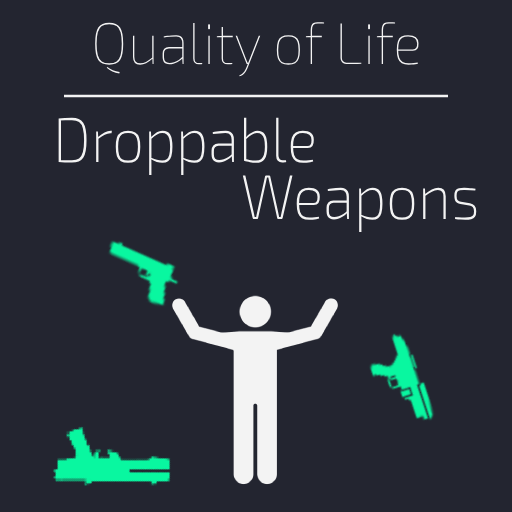
<style>
.page{position:relative;width:512px;height:512px;background:#232530}
.page>*{position:absolute;margin:0}
.t1{font:58.6px "Exo2-Thin";color:#f3f3f3;scale:0.94 1}
.t2{font:63.1px/56.8px "Exo2-ExtraLight";color:#f3f3f3;scale:0.9 1}
</style>
<div class="page">
<p class="t1" style="left:95px;top:22px;width:324px;height:55px">Quality of Life</p>
<p class="t2" style="left:58px;top:117px;width:419px;height:116px;text-align:center">Droppable<br>                           Weapons</p>
</div>
